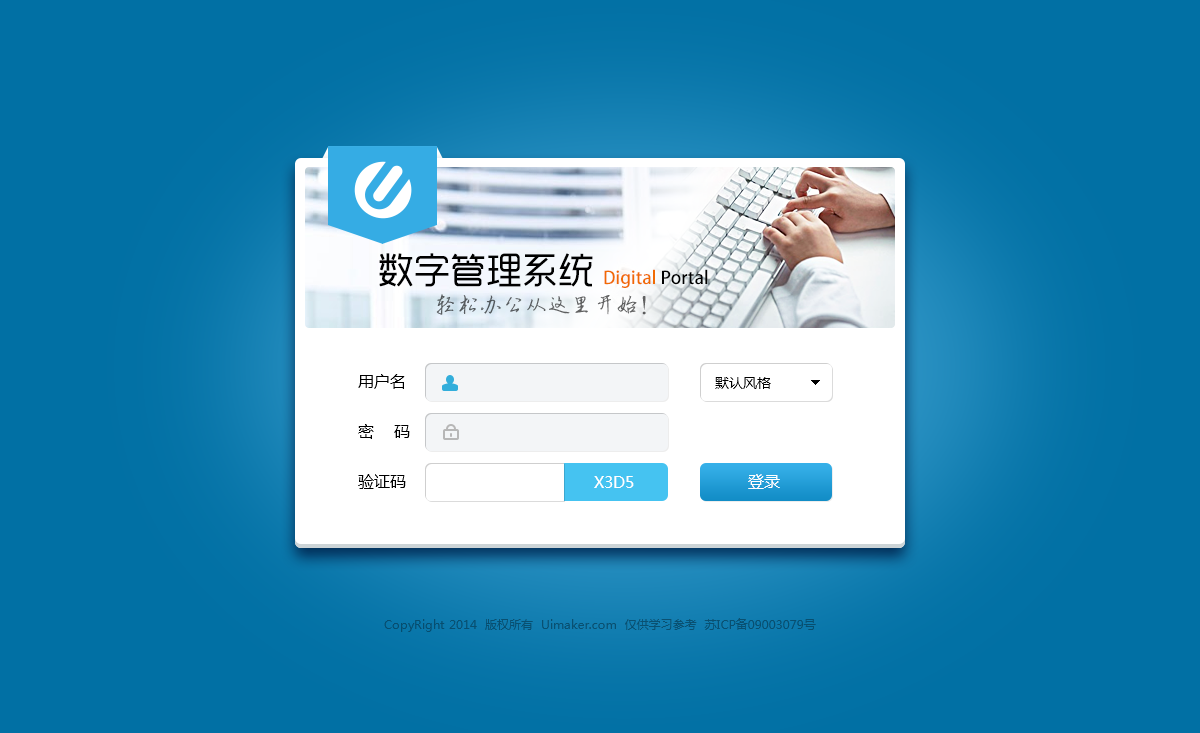
<style>
.page{position:relative;width:1200px;height:733px;background:#0170a4}
.page>*{position:absolute;margin:0}
.t1{font:36px "RTWSYueGoTrial-Regular";color:#000000}
.t2{font:17.8px "AdobeHeitiStd-Regular";color:#f16a03}
.t3{font:17.8px "AdobeHeitiStd-Regular";color:#000000}
.t4{font:22.7px "ÊéÌå·»ÕÔ¾Å½­¸Ö±ÊÐÐÊé";color:#5c5e60}
.t5{font:16px/50px "MicrosoftYaHei";color:#000000}
.t6{font:14px "MicrosoftYaHei";color:#000000}
.t7{font:16px "MicrosoftYaHei";color:#ffffff}
.t8{font:12px "MicrosoftYaHei";color:#085071}
</style>
<div class="page">
<p class="t1" style="left:379px;top:253px;width:214px;height:34px">数字管理系统</p>
<p class="t2" style="left:604px;top:269px;width:104px;height:19px">Digital<span class="t3"> Portal</span></p>
<p class="t4" style="left:436px;top:294px;width:210px;height:21px">轻松办公从这里开始！</p>
<p class="t5" style="left:358px;top:374px;width:52px;height:115px">用户名<br>密    码<br>验证码</p>
<p class="t6" style="left:715px;top:377px;width:56px;height:12px">默认风格</p>
<p class="t7" style="left:594px;top:476px;width:40px;height:12px">X3D5</p>
<p class="t7" style="left:748px;top:474px;width:32px;height:15px">登录</p>
<p class="t8" style="left:384px;top:618px;width:432px;height:14px">CopyRight 2014  版权所有  Uimaker.com  仅供学习参考  苏ICP备09003079号</p>
</div>
